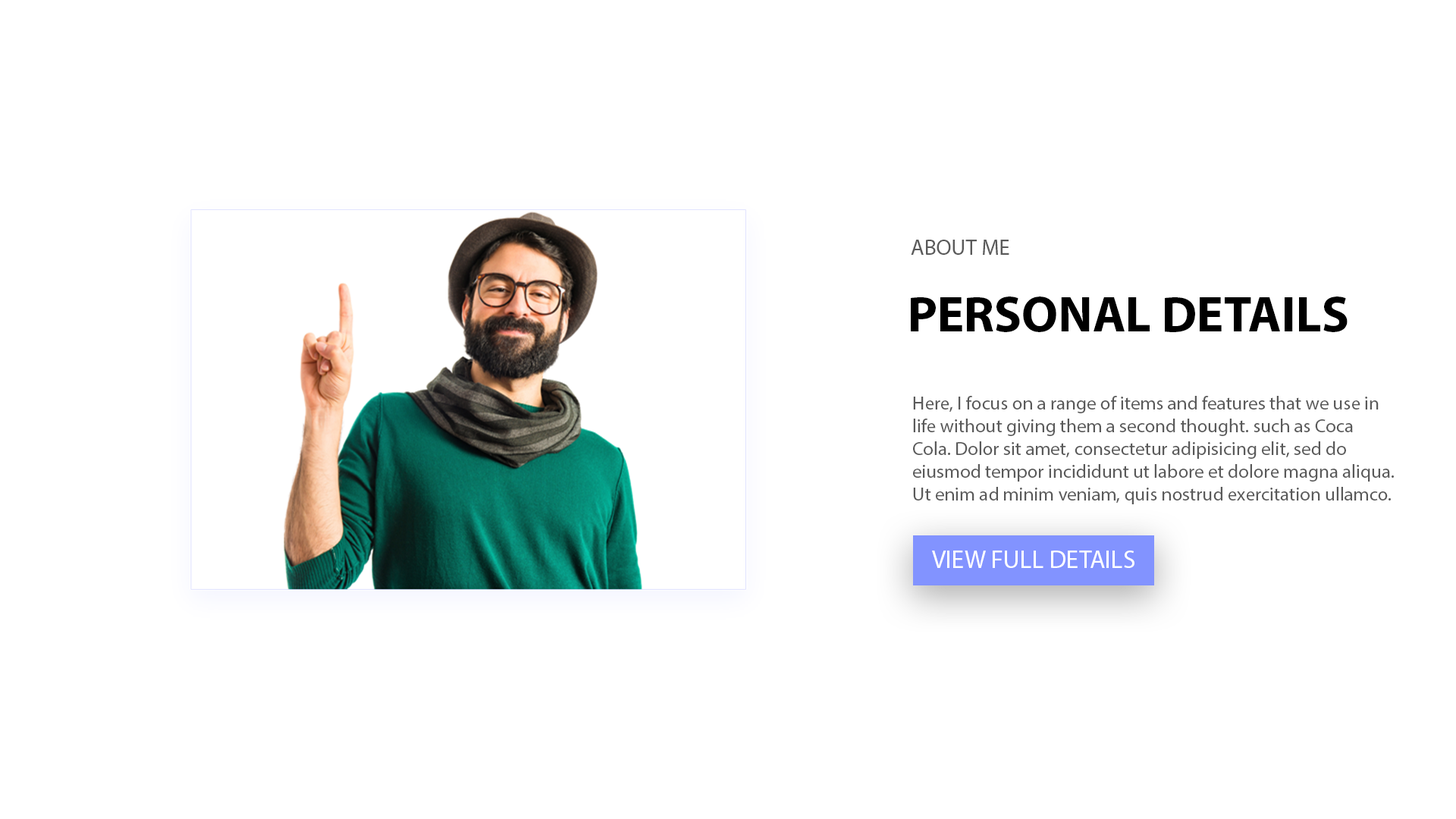
<style>
.page{position:relative;width:1456px;height:819px;background:#ffffff}
.page>*{position:absolute;margin:0}
.t1{font:22.1px "MyriadPro-Regular";color:#5a5a5a}
.t2{font:50.6px "MyriadPro-Bold";color:#000000}
.t3{font:19px "MyriadPro-Regular";color:#5a5a5a}
.t4{font:25.3px "MyriadPro-Regular";color:#ffffff}
</style>
<div class="page">
<p class="t1" style="left:911px;top:240px;width:98px;height:15px">ABOUT ME</p>
<p class="t2" style="left:911px;top:297px;width:437px;height:35px">PERSONAL DETAILS</p>
<p class="t3" style="left:913px;top:396px;width:481px;height:108px">Here, I focus on a range of items and features that we use in<br>life without giving them a second thought. such as Coca<br>Cola. Dolor sit amet, consectetur adipisicing elit, sed do<br>eiusmod tempor incididunt ut labore et dolore magna aliqua.<br>Ut enim ad minim veniam, quis nostrud exercitation ullamco.</p>
<p class="t4" style="left:932px;top:551px;width:202px;height:17px">VIEW FULL DETAILS</p>
</div>
